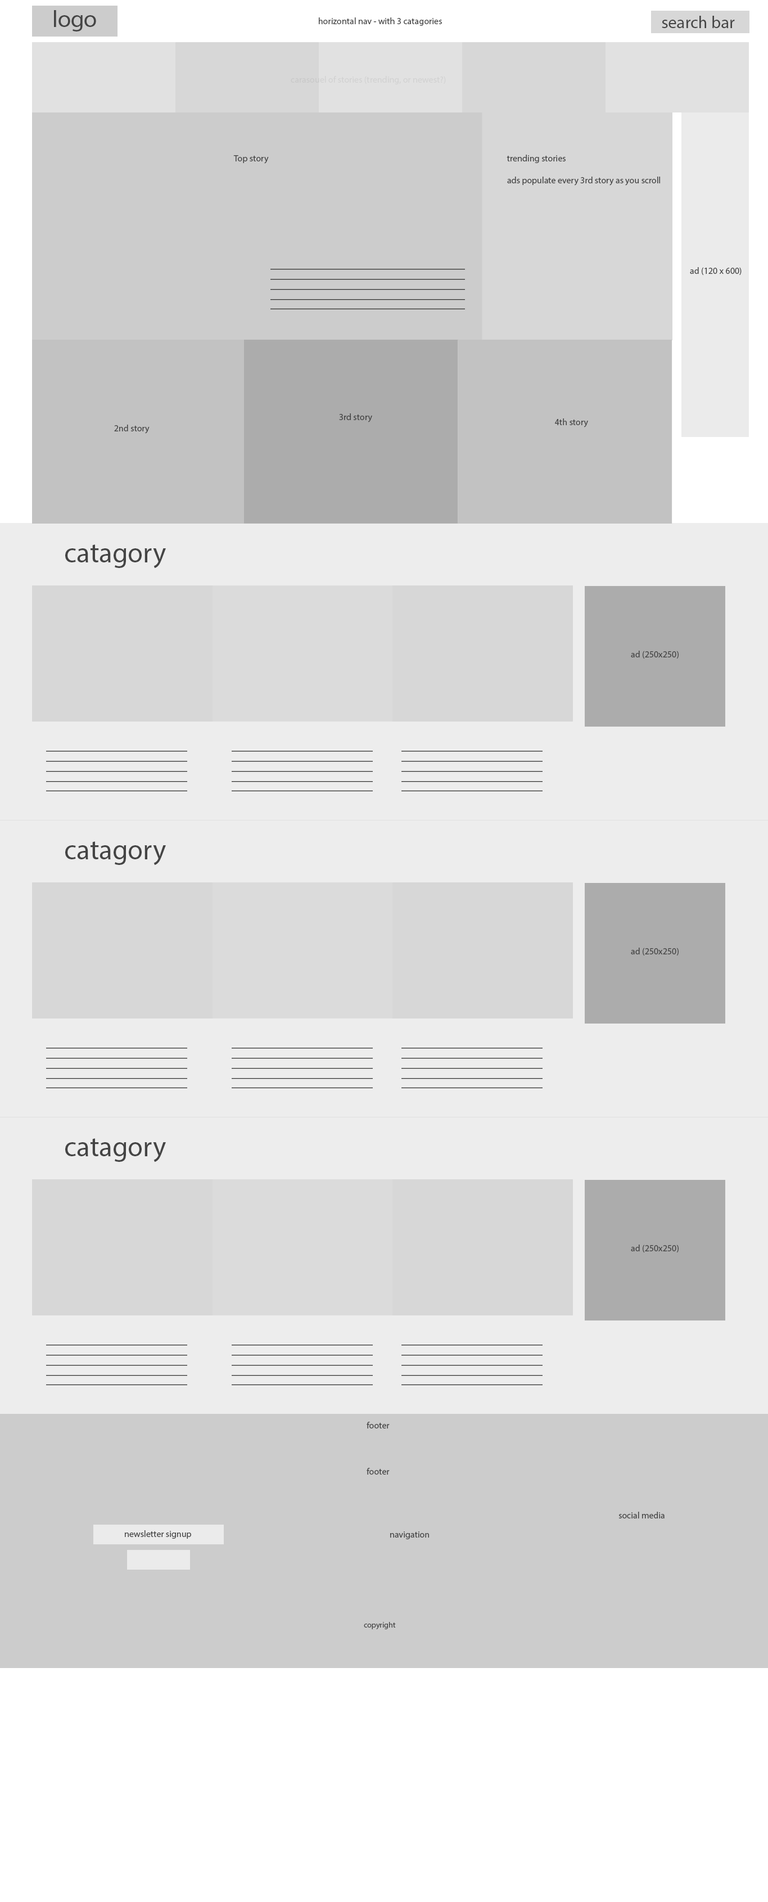
<style>
.page{position:relative;width:768px;height:1902px;background:#ededed}
.page>*{position:absolute;margin:0}
.t1{font:23.6px "MyriadPro-Regular";color:#444444}
.t2{font:9px "MyriadPro-Regular";color:#444444}
.t3{font:17.1px "MyriadPro-Regular";color:#444444}
.t4{font:9px "MyriadPro-Regular";color:#d2d2d2}
.t5{font:27.9px "MyriadPro-Regular";color:#444444}
.t6{font:7.9px "MyriadPro-Regular";color:#444444}
</style>
<div class="page">
<p class="t1" style="left:54px;top:10px;width:42px;height:22px">logo</p>
<p class="t2" style="left:319px;top:17px;width:123px;height:9px">horizontal nav - with 3 catagories</p>
<p class="t3" style="left:662px;top:16px;width:73px;height:12px">search bar</p>
<p class="t4" style="left:291px;top:76px;width:155px;height:8px">carasouel of stories (trending, or newest?)</p>
<p class="t2" style="left:233px;top:155px;width:36px;height:9px">Top story</p>
<p class="t2" style="left:507px;top:155px;width:153px;height:31px">trending stories<br><br>ads populate every 3rd story as you scroll</p>
<p class="t2" style="left:339px;top:413px;width:33px;height:9px">3rd story</p>
<p class="t2" style="left:114px;top:425px;width:36px;height:9px">2nd story</p>
<p class="t2" style="left:555px;top:418px;width:33px;height:10px">4th story</p>
<p class="t5" style="left:65px;top:544px;width:101px;height:24px">catagory</p>
<p class="t5" style="left:65px;top:842px;width:101px;height:23px">catagory</p>
<p class="t5" style="left:65px;top:1138px;width:101px;height:24px">catagory</p>
<p class="t2" style="left:367px;top:1422px;width:23px;height:7px">footer</p>
<p class="t2" style="left:367px;top:1468px;width:23px;height:7px">footer</p>
<p class="t2" style="left:619px;top:1512px;width:46px;height:7px">social media</p>
<p class="t2" style="left:125px;top:1531px;width:66px;height:8px">newsletter signup</p>
<p class="t2" style="left:390px;top:1532px;width:39px;height:8px">navigation</p>
<p class="t6" style="left:364px;top:1622px;width:32px;height:8px">copyright</p>
</div>
